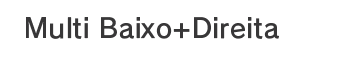
<style>
.page{position:relative;width:342px;height:60px;background:#ffffff}
.page>*{position:absolute;margin:0}
.t1{font:26.7px "RodinPro-DB";letter-spacing:0.008em;color:#383738}
</style>
<div class="page">
<p class="t1" style="left:26px;top:17px;width:253px;height:22px">Multi Baixo+Direita</p>
</div>
